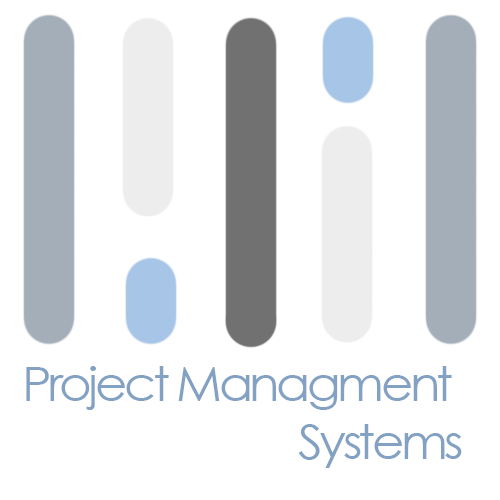
<style>
.page{position:relative;width:500px;height:500px;background:#ffffff}
.page>*{position:absolute;margin:0}
.t1{font:48px "CenturyGothic";letter-spacing:-0.075em;color:#83a1c2;scale:1.05 1}
</style>
<div class="page">
<p class="t1" style="left:26px;top:366px;width:436px;height:102px;text-align:right">Project Managment <br>Systems</p>
</div>
